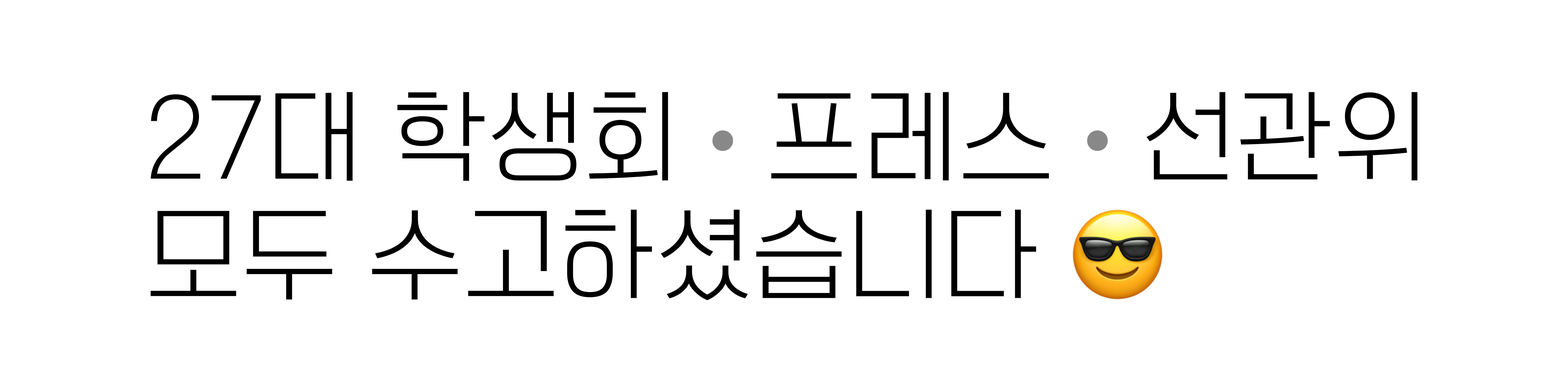
<style>
.page{position:relative;width:1568px;height:392px;background:#ffffff}
.page>*{position:absolute;margin:0}
.t1{font:98px "OTOmniGothicL";color:#000000}
.t2{font:98px "MyriadPro-Regular";color:#888888}
.t3{font:98px "AppleColorEmoji";color:#000000}
</style>
<div class="page">
<p class="t1" style="left:151px;top:92px;width:1266px;height:211px">27대 학생회 <span class="t2">• </span>프레스 <span class="t2">• </span>선관위<br>모두 수고하셨습니다 <span class="t3">😎</span></p>
</div>
